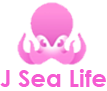
<style>
.page{position:relative;width:107px;height:91px;background:#ffffff}
.page>*{position:absolute;margin:0}
.t1{font:24px "CenturyGothic-Bold";color:#f55bd1}
</style>
<div class="page">
<p class="t1" style="left:0px;top:69px;width:106px;height:18px">J Sea Life</p>
</div>
